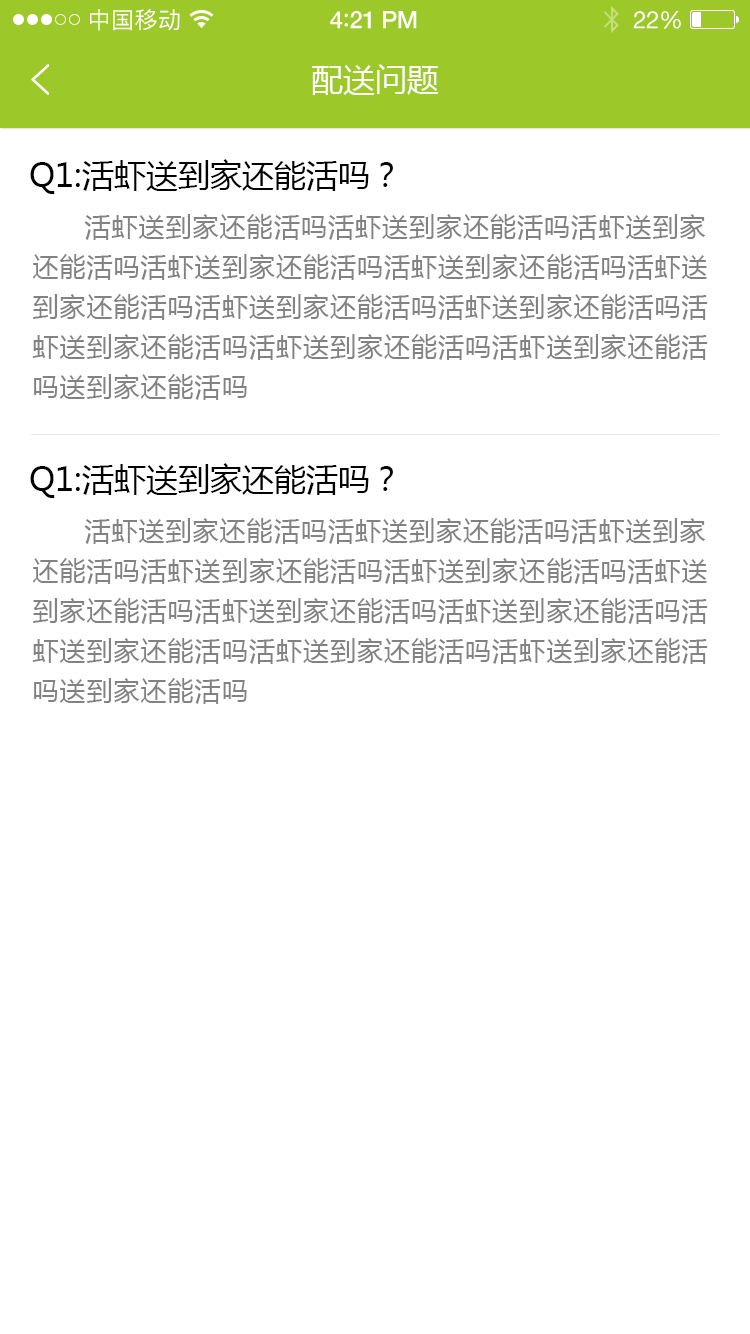
<style>
.page{position:relative;width:750px;height:1334px;background:#ffffff}
.page>*{position:absolute;margin:0}
.t1{font:23px "PingFangSC-Regular";letter-spacing:0.02em;color:#ffffff}
.t2{font:24px "HelveticaNeue-Medium";letter-spacing:-0.02em;color:#ffffff}
.t3{font:26px "Avenir-Medium";letter-spacing:-0.02em;color:#ffffff}
.t4{font:24px "HelveticaNeue";letter-spacing:-0.02em;color:#ffffff}
.t5{font:32px "MicrosoftYaHei";color:#ffffff;text-transform:uppercase}
.t6{font:32px "MicrosoftYaHei";color:#000000;text-transform:uppercase}
.t7{font:26px/40px "MicrosoftYaHei";letter-spacing:0.04em;color:#828282;text-transform:uppercase}
</style>
<div class="page">
<p class="t1" style="left:90px;top:9px;width:90px;height:22px">中国移动</p>
<p class="t2" style="left:330px;top:11px;width:87px;height:18px">4<span class="t3">:</span>21 PM</p>
<p class="t4" style="left:633px;top:11px;width:48px;height:18px">22%</p>
<p class="t5" style="left:312px;top:64px;width:127px;height:31px">配送问题</p>
<p class="t6" style="left:30px;top:159px;width:363px;height:35px">Q1:活虾送到家还能活吗？</p>
<p class="t7" style="left:32px;top:214px;width:676px;height:186px">活虾送到家还能活吗活虾送到家还能活吗活虾送到家还能活吗活虾送到家还能活吗活虾送到家还能活吗活虾送到家还能活吗活虾送到家还能活吗活虾送到家还能活吗活虾送到家还能活吗活虾送到家还能活吗活虾送到家还能活吗送到家还能活吗</p>
<p class="t6" style="left:30px;top:463px;width:363px;height:35px">Q1:活虾送到家还能活吗？</p>
<p class="t7" style="left:32px;top:518px;width:676px;height:186px">活虾送到家还能活吗活虾送到家还能活吗活虾送到家还能活吗活虾送到家还能活吗活虾送到家还能活吗活虾送到家还能活吗活虾送到家还能活吗活虾送到家还能活吗活虾送到家还能活吗活虾送到家还能活吗活虾送到家还能活吗送到家还能活吗</p>
</div>
